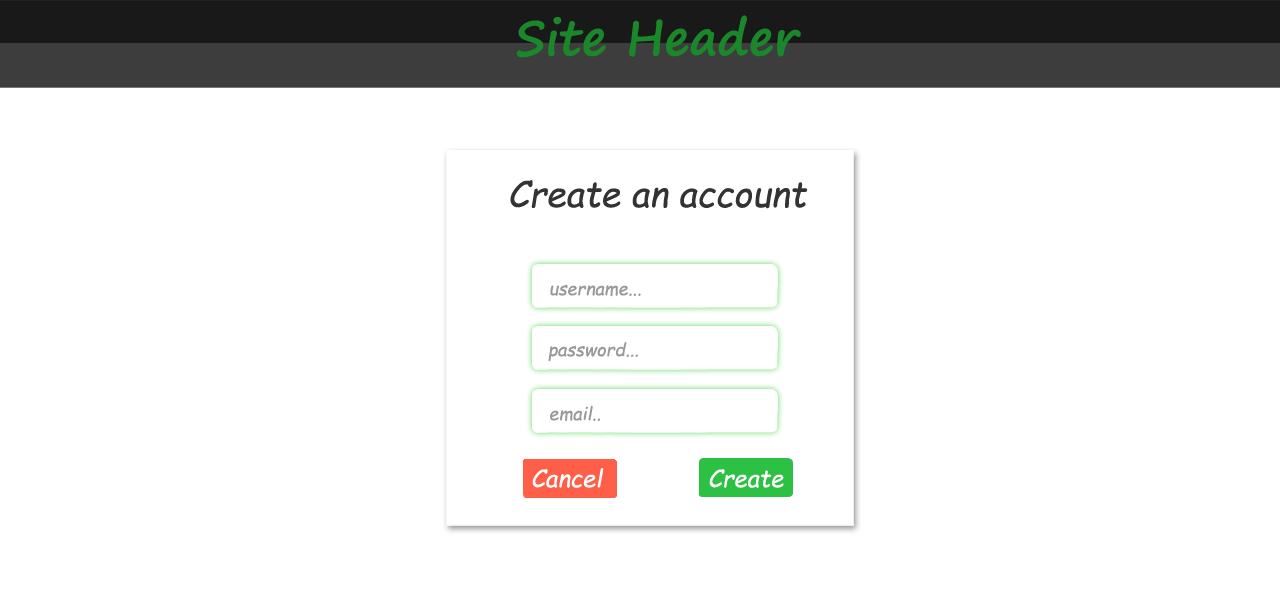
<style>
.page{position:relative;width:1280px;height:600px;background:#ffffff}
.page>*{position:absolute;margin:0}
.t1{font:48px "SegoePrint-Bold";color:#19872a}
.t2{font:35.7px "ComicSansMS-Italic";color:#333333}
.t3{font:18px "ComicSansMS-Italic";color:#999999}
.t4{font:24px "ComicSansMS-Italic";color:#ffffff}
</style>
<div class="page">
<p class="t1" style="left:516px;top:15px;width:285px;height:43px">Site Header</p>
<p class="t2" style="left:510px;top:180px;width:298px;height:29px">Create an account</p>
<p class="t3" style="left:550px;top:284px;width:91px;height:13px">username...</p>
<p class="t3" style="left:548px;top:342px;width:90px;height:20px">password...</p>
<p class="t3" style="left:550px;top:405px;width:50px;height:17px">email..</p>
<p class="t4" style="left:532px;top:468px;width:72px;height:20px">Cancel</p>
<p class="t4" style="left:709px;top:469px;width:75px;height:19px">Create</p>
</div>
